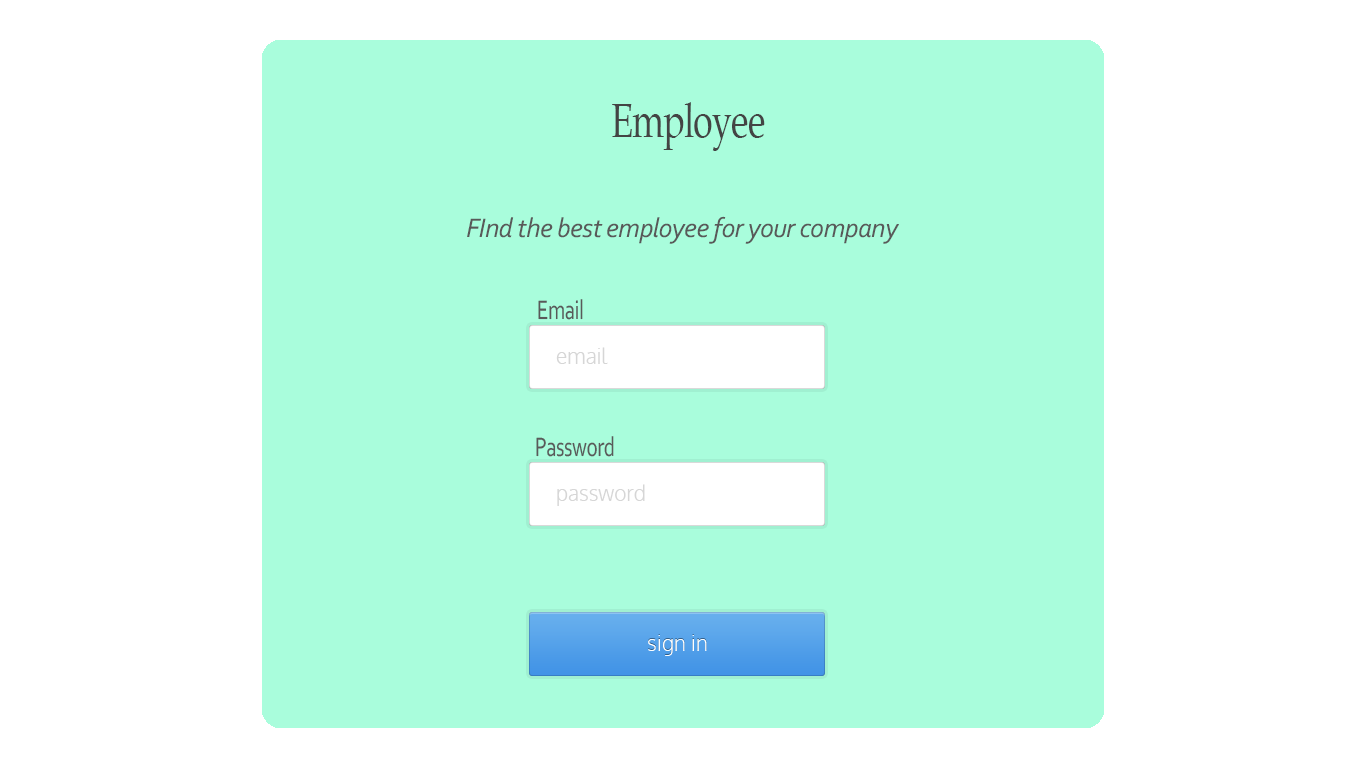
<style>
.page{position:relative;width:1366px;height:768px;background:#a9fddc}
.page>*{position:absolute;margin:0}
.t1{font:48px "BookAntiqua";letter-spacing:-0.025em;color:#444444;scale:0.75 1}
.t2{font:28px "Corbel-Italic";letter-spacing:-0.025em;color:#595959}
.t3{font:28px "Corbel";letter-spacing:-0.025em;color:#595959;scale:0.75 1}
.t4{font:21px "Oxygen-Light";color:#d6d6d6}
.t5{font:28px "Corbel";letter-spacing:-0.025em;color:#5a5a5a;scale:0.75 1}
.t6{font:21px "Oxygen-Light";color:#ffffff}
</style>
<div class="page">
<p class="t1" style="left:612px;top:102px;width:153px;height:49px">Employee</p>
<p class="t2" style="left:467px;top:216px;width:432px;height:28px">FInd the best employee for your company</p>
<p class="t3" style="left:538px;top:299px;width:45px;height:21px">Email</p>
<p class="t4" style="left:556px;top:347px;width:52px;height:17px">email</p>
<p class="t5" style="left:536px;top:436px;width:78px;height:21px">Password</p>
<p class="t4" style="left:557px;top:484px;width:88px;height:22px">password</p>
<p class="t6" style="left:648px;top:635px;width:59px;height:21px">sign in</p>
</div>
